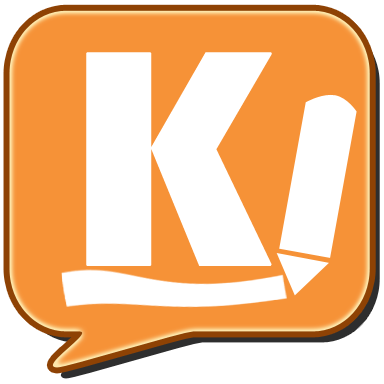
<style>
.page{position:relative;width:384px;height:384px;background:#ffffff}
.page>*{position:absolute;margin:0}
.t1{font:317.5px "Bauhaus93";letter-spacing:0.2em;color:#ffffff;font-weight:bold}
</style>
<div class="page">
<p class="t1" style="left:86px;top:52px;width:186px;height:214px">K</p>
</div>
